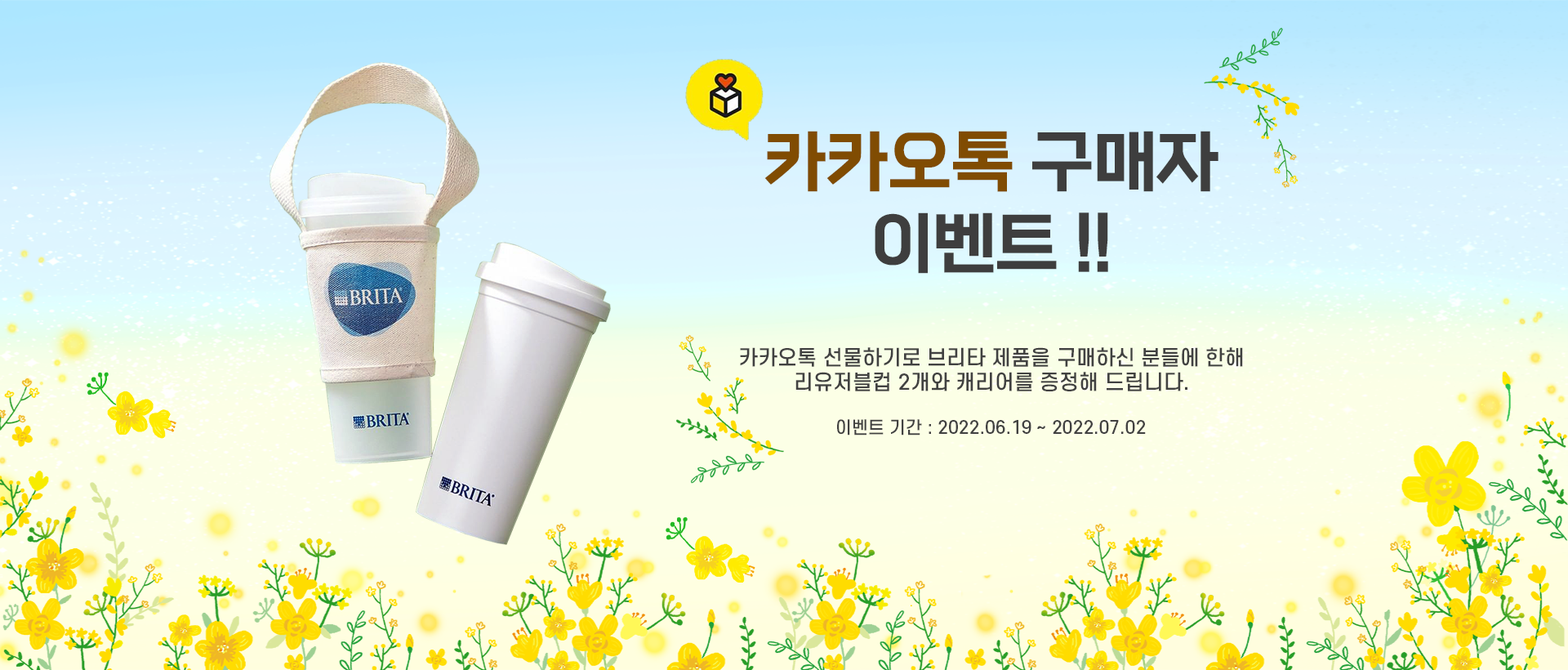
<style>
.page{position:relative;width:1568px;height:670px}
.page>*{position:absolute;margin:0}
.t1{font:68.1px "GongGothicMedium";color:#3e3e3e}
.t2{font:68.1px "GongGothicMedium";color:#804c02}
.t3{font:20.4px "S-CoreDream-5Medium";color:#414141}
.t4{font:17px "S-CoreDream-5Medium";color:#414141}
</style>
<div class="page">
<p class="t1" style="left:764px;top:131px;width:454px;height:143px;text-align:center"><span class="t2">카카오톡 </span>구매자<br>이벤트 !!</p>
<p class="t3" style="left:740px;top:347px;width:503px;height:45px;text-align:center">카카오톡 선물하기로 브리타 제품을 구매하신 분들에 한해<br>리유저블컵 2개와 캐리어를 증정해 드립니다.</p>
<p class="t4" style="left:837px;top:419px;width:309px;height:16px">이벤트 기간 : 2022.06.19 ~ 2022.07.02</p>
</div>
